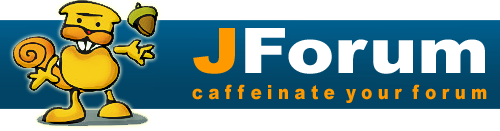
<style>
.page{position:relative;width:500px;height:131px;background:#ffffff}
.page>*{position:absolute;margin:0}
.t1{font:63px "Arial-Black";color:#ffffff;scale:1.15 1}
.t2{font:63px "Arial-Black";color:#ff9900;scale:1.15 1}
.t3{font:19.6px "Arial-Black";color:#ff9900;scale:0.84 1}
</style>
<div class="page">
<p class="t1" style="left:193px;top:28px;width:292px;height:46px"><span class="t2">J</span>Forum</p>
<p class="t3" style="left:192px;top:84px;width:295px;height:19px">c a f f e i n a t e  y o u r  f o r u m</p>
</div>
